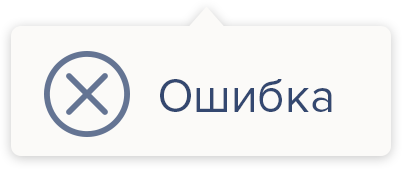
<style>
.page{position:relative;width:402px;height:169px;background:#fbfaf8}
.page>*{position:absolute;margin:0}
.t1{font:48px "ProximaNova-Regular";color:#344870}
</style>
<div class="page">
<p class="t1" style="left:160px;top:79px;width:172px;height:33px">Ошибка</p>
</div>
